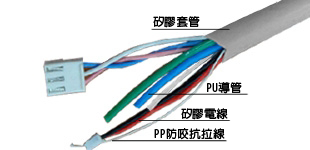
<style>
.page{position:relative;width:310px;height:150px;background:#ffffff}
.page>*{position:absolute;margin:0}
.t1{font:11.5px "AdobeFanHeitiStd-Bold";letter-spacing:0.025em;color:#000000}
</style>
<div class="page">
<p class="t1" style="left:153px;top:16px;width:47px;height:12px">矽膠套管</p>
<p class="t1" style="left:207px;top:82px;width:35px;height:12px">PU導管</p>
<p class="t1" style="left:181px;top:108px;width:47px;height:12px">矽膠電線</p>
<p class="t1" style="left:154px;top:128px;width:71px;height:12px">PP防咬抗拉線</p>
</div>
